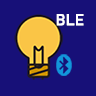
<style>
.page{position:relative;width:96px;height:96px;background:#171078}
.page>*{position:absolute;margin:0}
.t1{font:15.2px "Bahnschrift";color:#ffffff;font-weight:bold}
</style>
<div class="page">
<p class="t1" style="left:56px;top:14px;width:28px;height:12px">BLE</p>
</div>
